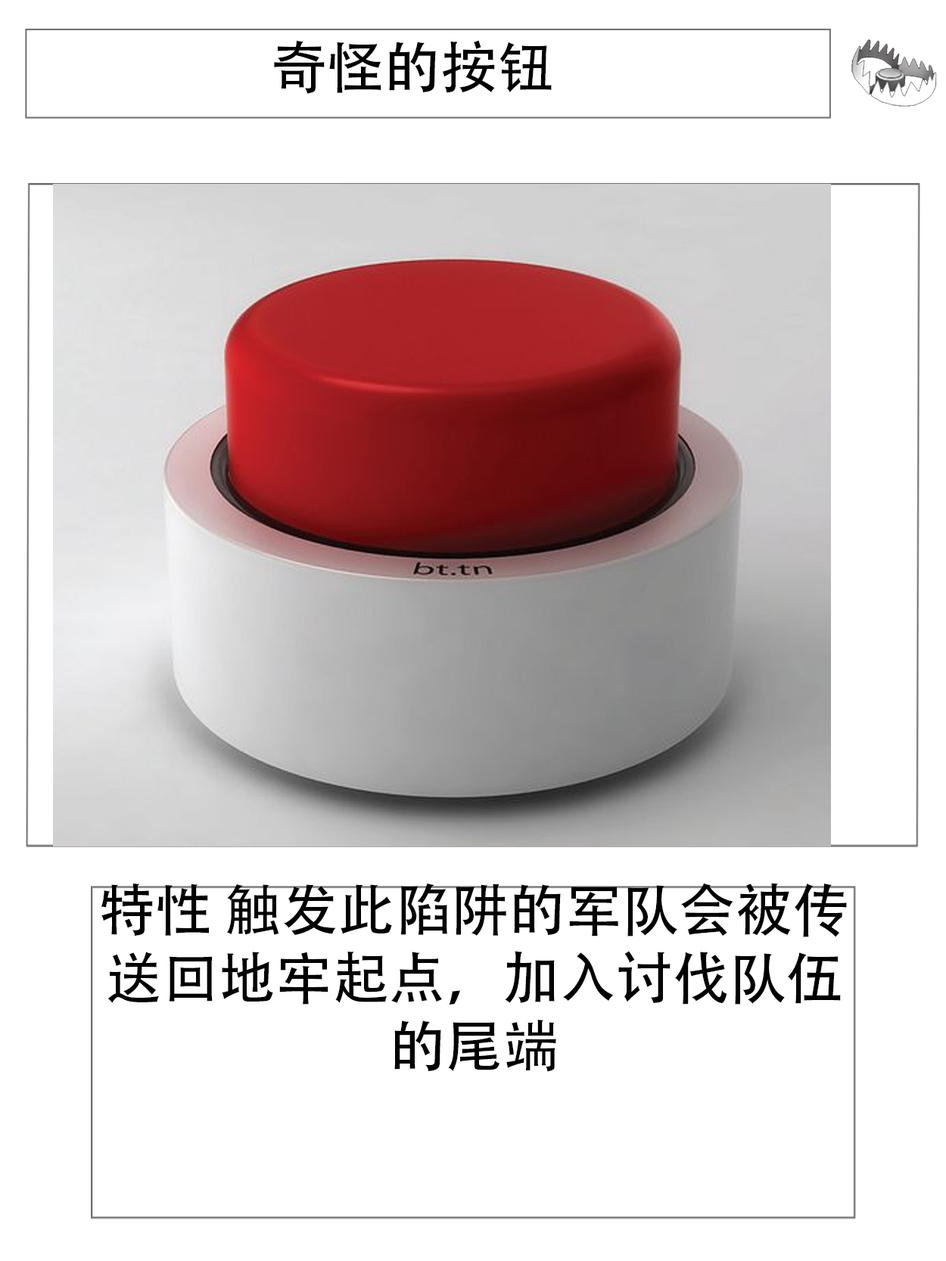
<style>
.page{position:relative;width:946px;height:1261px;background:#ffffff}
.page>*{position:absolute;margin:0}
.t1{font:56.7px "AdobeHeitiStd-Regular";color:#000000}
</style>
<div class="page">
<p class="t1" style="left:274px;top:40px;width:277px;height:54px">奇怪的按钮</p>
<p class="t1" style="left:101px;top:883px;width:745px;height:189px;text-align:center">特性 触发此陷阱的军队会被传送回地牢起点，加入讨伐队伍的尾端</p>
</div>
